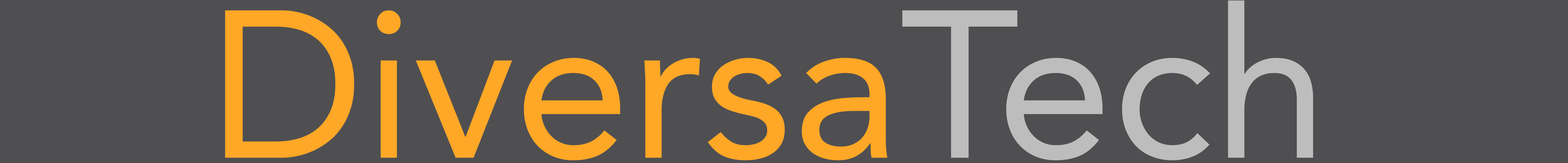
<style>
.page{position:relative;width:1568px;height:163px;background:#4f4f51}
.page>*{position:absolute;margin:0}
.t1{font:208.2px "Avenir-Roman";color:#ffa726}
.t2{font:208.2px "Avenir-Roman";color:#bdbdbd}
</style>
<div class="page">
<p class="t1" style="left:225px;top:0px;width:1088px;height:161px">Diversa<span class="t2">Tech</span></p>
</div>
